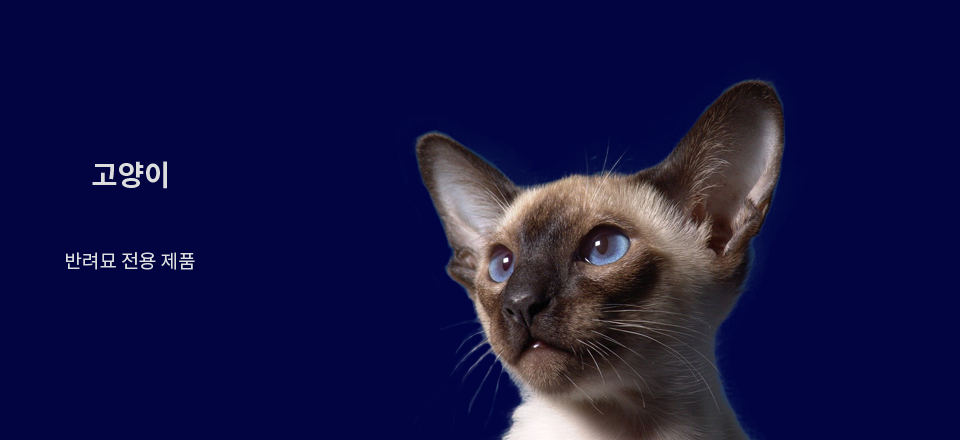
<style>
.page{position:relative;width:960px;height:440px;background:#010440}
.page>*{position:absolute;margin:0}
.t1{font:28.9px "NotoSansKR-Bold";color:#dcdddd}
.t2{font:19px "NotoSansKR-Regular";color:#dcdddd}
</style>
<div class="page">
<p class="t1" style="left:92px;top:161px;width:75px;height:28px">고양이</p>
<p class="t2" style="left:66px;top:252px;width:129px;height:18px">반려묘 전용 제품</p>
</div>
